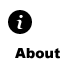
<style>
.page{position:relative;width:75px;height:64px;background:#ffffff}
.page>*{position:absolute;margin:0}
.t1{font:14px "Arial-Black";color:#000000}
</style>
<div class="page">
<p class="t1" style="left:15px;top:48px;width:45px;height:11px">About</p>
</div>
